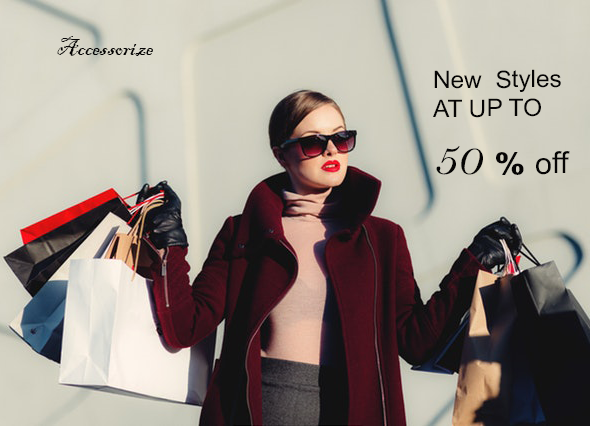
<style>
.page{position:relative;width:590px;height:426px}
.page>*{position:absolute;margin:0}
.t1{font:24px "BlackadderITC-Regular";color:#060505}
.t2{font:24px "ArialMT";color:#060505}
.t3{font:48px "BellMTItalic";color:#060505}
.t4{font:30px "Arial-Black";color:#060505}
.t5{font:30px "ArialMT";color:#060505}
</style>
<div class="page">
<p class="t1" style="left:57px;top:36px;width:96px;height:20px">Accessorize</p>
<p class="t2" style="left:433px;top:69px;width:137px;height:106px">New  Styles<br>AT UP TO <br><span class="t3">50 </span><span class="t4">% </span><span class="t5">off</span></p>
</div>
